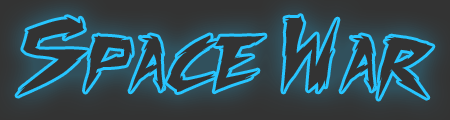
<style>
.page{position:relative;width:450px;height:120px;background:#333333}
.page>*{position:absolute;margin:0}
.t1{font:83.3px "FightingSpiritTBS";color:#333333}
</style>
<div class="page">
<p class="t1" style="left:17px;top:16px;width:416px;height:83px">Space War</p>
</div>
